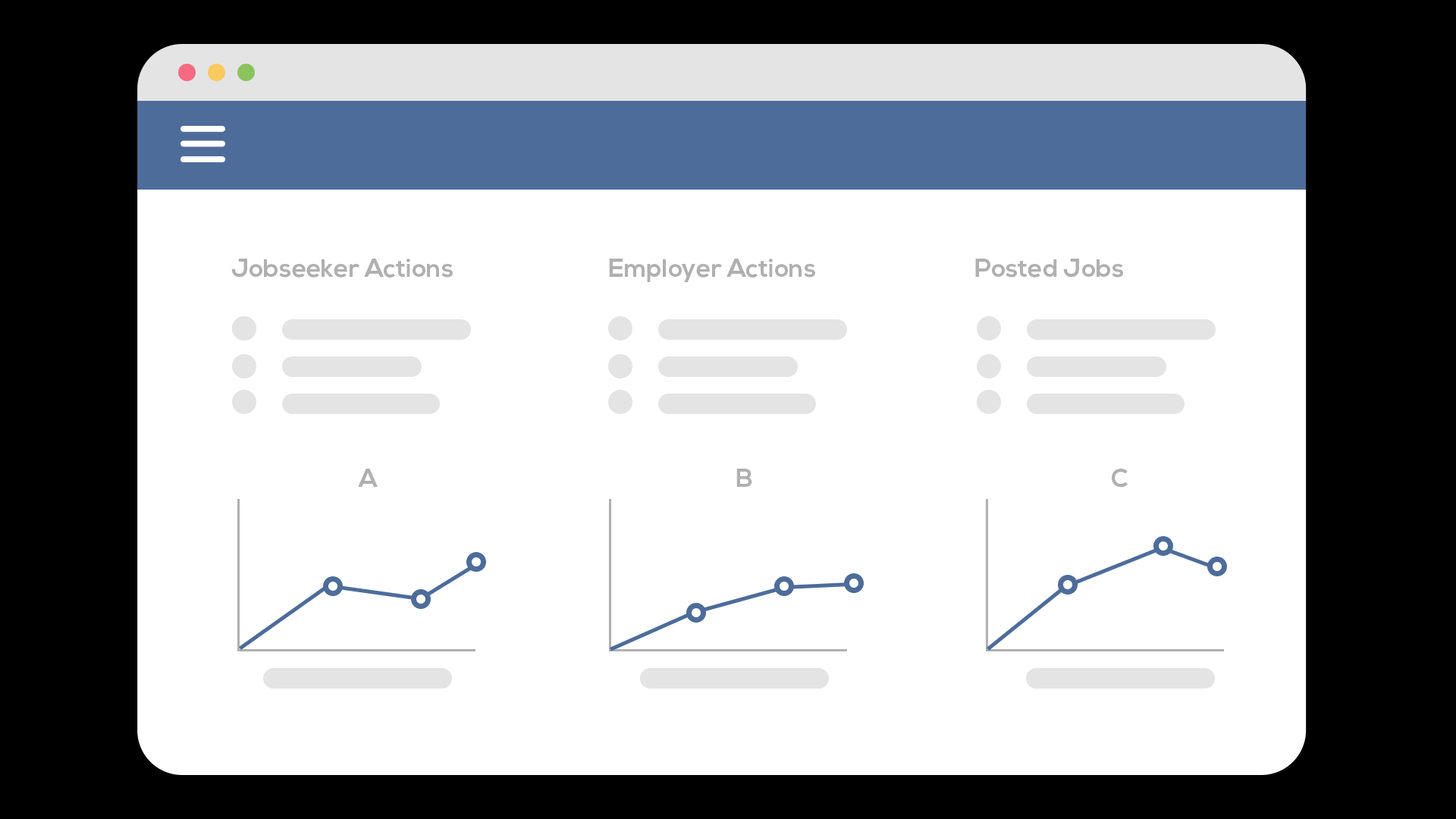
<style>
.page{position:relative;width:1456px;height:819px;background:#ffffff}
.page>*{position:absolute;margin:0}
.t1{font:25.3px "NexaBold";color:#b0b0b0}
</style>
<div class="page">
<p class="t1" style="left:231px;top:259px;width:222px;height:19px">Jobseeker Actions</p>
<p class="t1" style="left:609px;top:259px;width:206px;height:23px">Employer Actions</p>
<p class="t1" style="left:975px;top:259px;width:148px;height:19px">Posted Jobs</p>
<p class="t1" style="left:358px;top:469px;width:20px;height:18px">A</p>
<p class="t1" style="left:736px;top:469px;width:16px;height:18px">B</p>
<p class="t1" style="left:1112px;top:469px;width:16px;height:19px">C</p>
</div>
